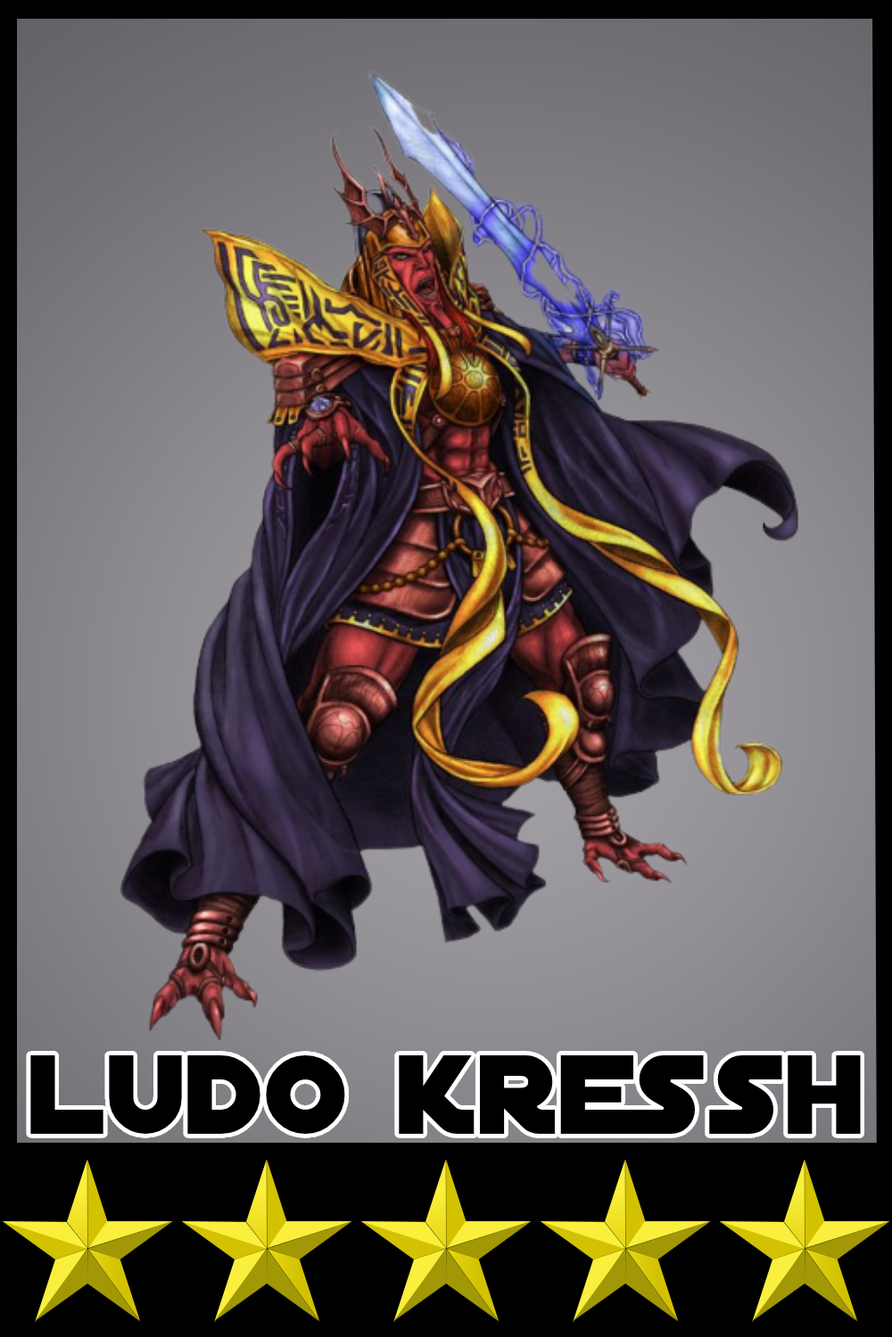
<style>
.page{position:relative;width:892px;height:1337px}
.page>*{position:absolute;margin:0}
.t1{font:120.7px "DistantGalaxy";color:#000000}
</style>
<div class="page">
<p class="t1" style="left:30px;top:1056px;width:830px;height:78px">ludo kressh</p>
</div>
